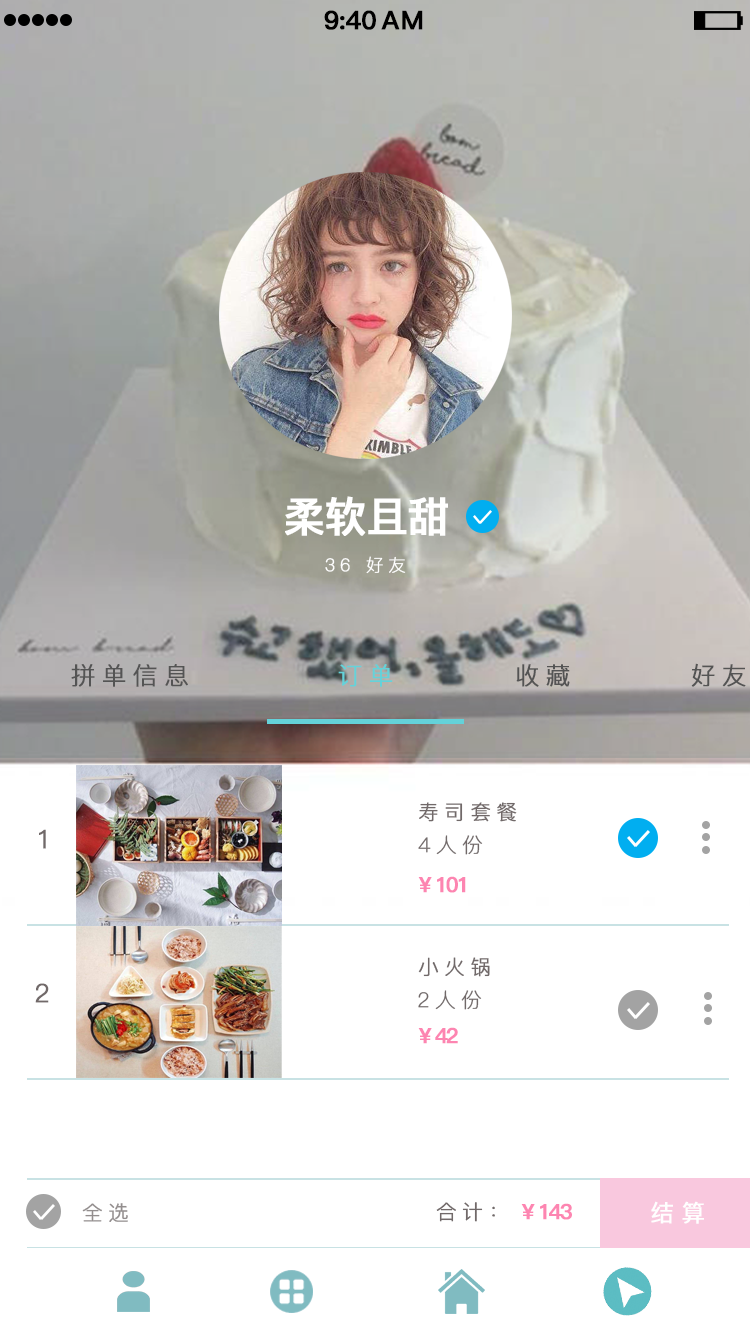
<style>
.page{position:relative;width:750px;height:1334px;background:#ffffff}
.page>*{position:absolute;margin:0}
.t1{font:25.4px "PingFang-SC-Bold";letter-spacing:-0.028em;color:#000000;font-weight:bold}
.t2{font:25.4px "PingFang-SC-Bold";letter-spacing:0.052em;color:#000000;font-weight:bold}
.t3{font:41.4px "PingFang-SC-Bold";letter-spacing:-0.028em;color:#ffffff;font-weight:bold}
.t4{font:17.4px "PingFang-SC-Light";letter-spacing:0.252em;color:#ffffff;font-weight:bold}
.t5{font:24.3px "PingFang-SC-Regular";letter-spacing:0.252em;color:#545454;font-weight:bold}
.t6{font:24.3px "PingFang-SC-Regular";letter-spacing:0.252em;color:#64d2d9;font-weight:bold}
.t7{font:20.4px "PingFang-SC-Regular";letter-spacing:0.252em;color:#716969;font-weight:bold}
.t8{font:25.4px "PingFang-SC-Regular";letter-spacing:0.252em;color:#716969;font-weight:bold}
.t9{font:20.4px "PingFang-SC-Light";letter-spacing:0.252em;color:#716969;font-weight:bold}
.t10{font:21px "PingFang-SC-Bold";letter-spacing:-0.108em;color:#fd85b1;font-weight:bold}
.t11{font:20.4px "PingFang-SC-Regular";letter-spacing:0.252em;color:#938e8e;font-weight:bold}
.t12{font:23.4px "PingFang-SC-Medium";letter-spacing:0.312em;color:#ffffff;font-weight:bold}
</style>
<div class="page">
<p class="t1" style="left:324px;top:10px;width:52px;height:20px">9:40</p>
<p class="t2" style="left:381px;top:10px;width:42px;height:20px">AM</p>
<p class="t3" style="left:285px;top:496px;width:163px;height:40px">柔软且甜</p>
<p class="t4" style="left:325px;top:556px;width:81px;height:18px">36 好友</p>
<p class="t5" style="left:71px;top:664px;width:117px;height:23px">拼单信息</p>
<p class="t6" style="left:338px;top:664px;width:55px;height:23px">订单</p>
<p class="t5" style="left:516px;top:664px;width:54px;height:23px">收藏</p>
<p class="t5" style="left:691px;top:663px;width:55px;height:24px">好友</p>
<p class="t7" style="left:419px;top:802px;width:98px;height:20px">寿司套餐</p>
<p class="t8" style="left:39px;top:829px;width:7px;height:20px">1</p>
<p class="t9" style="left:418px;top:835px;width:65px;height:20px">4人份</p>
<p class="t10" style="left:418px;top:876px;width:48px;height:17px">¥ 101</p>
<p class="t7" style="left:418px;top:957px;width:72px;height:20px">小火锅</p>
<p class="t8" style="left:35px;top:983px;width:14px;height:20px">2</p>
<p class="t9" style="left:418px;top:990px;width:64px;height:20px">2人份</p>
<p class="t10" style="left:418px;top:1027px;width:40px;height:17px">¥ 42</p>
<p class="t11" style="left:82px;top:1203px;width:46px;height:19px">全选</p>
<p class="t7" style="left:436px;top:1202px;width:59px;height:20px">合计：</p>
<p class="t10" style="left:521px;top:1203px;width:51px;height:17px">¥ 143</p>
<p class="t12" style="left:651px;top:1201px;width:53px;height:23px">结算</p>
</div>
